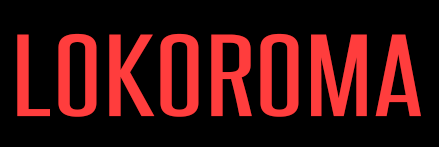
<style>
.page{position:relative;width:439px;height:147px;background:#000000}
.page>*{position:absolute;margin:0}
.t1{font:99.3px "SteelfishRg-Regular";letter-spacing:0.02em;color:#ff3d3d;scale:1.47 1}
</style>
<div class="page">
<p class="t1" style="left:17px;top:33px;width:404px;height:84px">LOKOROMA</p>
</div>
